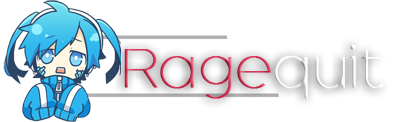
<style>
.page{position:relative;width:411px;height:122px;background:#ffffff}
.page>*{position:absolute;margin:0}
.t1{font:48px "Adequate-ExtraLight";font-weight:bold}
</style>
<div class="page">
<p class="t1" style="left:124px;top:45px;width:260px;height:54px">Ragequit</p>
</div>
